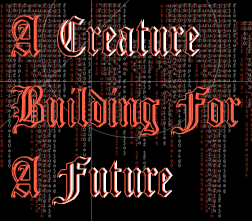
<style>
.page{position:relative;width:252px;height:221px;background:#000000}
.page>*{position:absolute;margin:0}
.t1{font:59.3px/70.6px "CloisterBlack-Light";scale:0.75 1}
</style>
<div class="page">
<p class="t1" style="left:12px;top:15px;width:229px;height:191px">A Creature<br>Building For<br>A Future</p>
</div>
